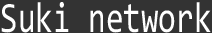
<style>
.page{position:relative;width:212px;height:33px;background:#333333}
.page>*{position:absolute;margin:0}
.t1{font:43.2px "Consolas";color:#ffffff;scale:0.74 1}
</style>
<div class="page">
<p class="t1" style="left:1px;top:2px;width:210px;height:31px">Suki network</p>
</div>
